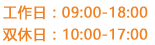
<style>
.page{position:relative;width:155px;height:45px;background:#ffffff}
.page>*{position:absolute;margin:0}
.t1{font:14px "MicrosoftYaHei";letter-spacing:0.025em;color:#f08226;font-weight:bold}
</style>
<div class="page">
<p class="t1" style="left:3px;top:5px;width:145px;height:15px">工作日：09:00-18:00</p>
<p class="t1" style="left:3px;top:27px;width:145px;height:15px">双休日：10:00-17:00</p>
</div>
